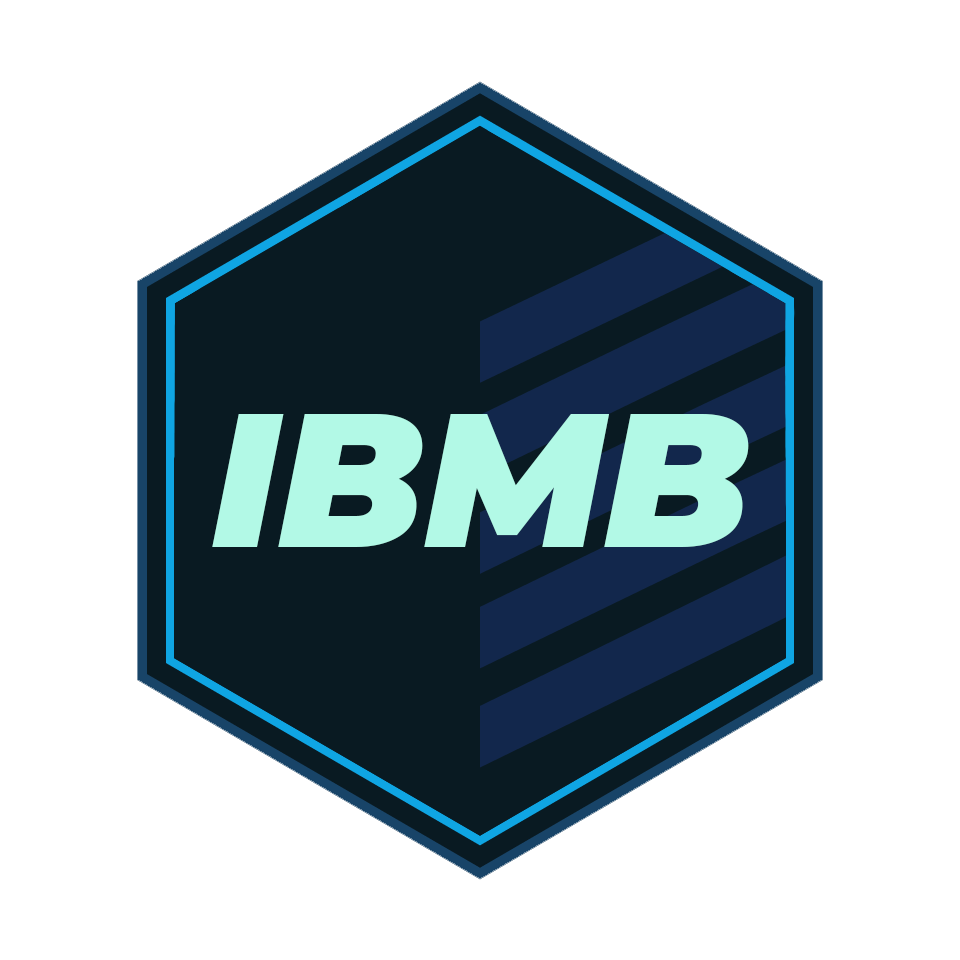
<style>
.page{position:relative;width:960px;height:960px;background:#ffffff}
.page>*{position:absolute;margin:0}
.t1{font:189.3px "Montserrat-BlackItalic";color:#b2f9e6}
</style>
<div class="page">
<p class="t1" style="left:212px;top:414px;width:537px;height:133px">IBMB</p>
</div>
